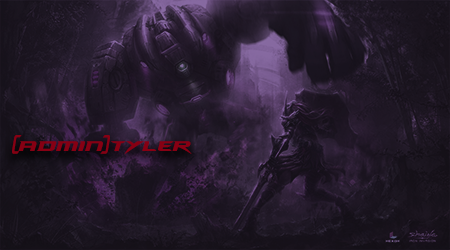
<style>
.page{position:relative;width:450px;height:250px}
.page>*{position:absolute;margin:0}
.t1{font:27.4px "NHLDucks";letter-spacing:0.05em;color:#860013;text-transform:uppercase;scale:0.9 1}
</style>
<div class="page">
<p class="t1" style="left:12px;top:135px;width:180px;height:20px">[Admin]Tyler</p>
</div>
